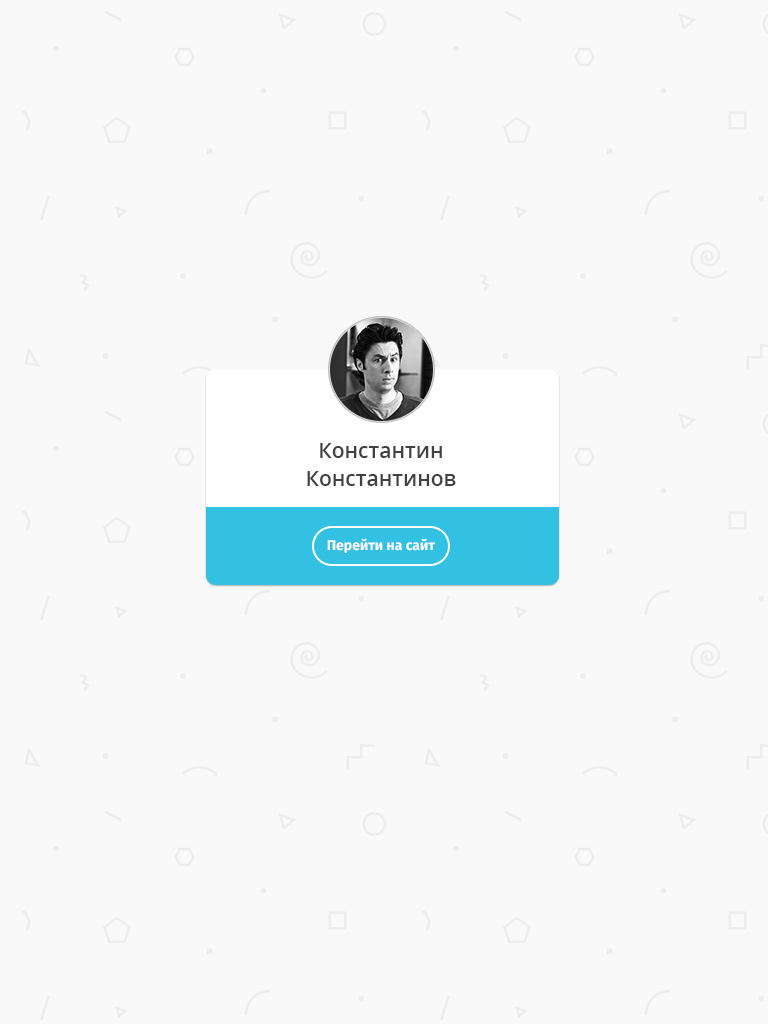
<style>
.page{position:relative;width:768px;height:1024px;background:#f9f9fa}
.page>*{position:absolute;margin:0}
.t1{font:21px/28px "OpenSans-Semibold";color:#414141}
.t2{font:14px "FiraSans-Bold";color:#ffffff}
</style>
<div class="page">
<p class="t1" style="left:307px;top:443px;width:149px;height:43px;text-align:center">Константин<br>Константинов</p>
<p class="t2" style="left:327px;top:538px;width:108px;height:15px">Перейти на сайт</p>
</div>
